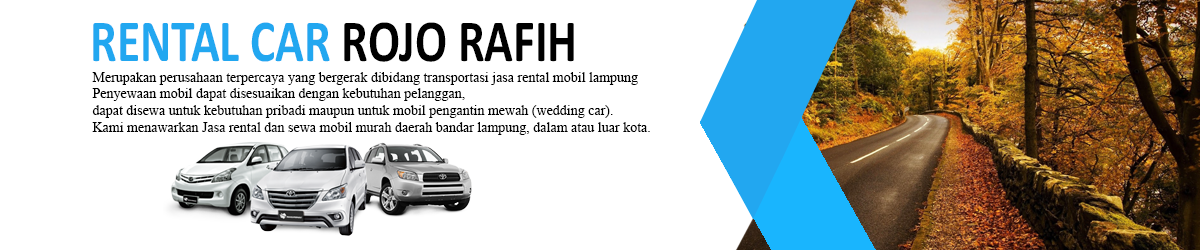
<style>
.page{position:relative;width:1200px;height:250px;background:#ffffff}
.page>*{position:absolute;margin:0}
.t1{font:60px "Calibri-Bold";color:#22a7f0;scale:0.79 1}
.t2{font:60px "Calibri-Bold";color:#000000;scale:0.79 1}
.t3{font:14px "TimesNewRomanPSMT";color:#000000}
</style>
<div class="page">
<p class="t1" style="left:93px;top:22px;width:481px;height:40px">RENTAL CAR<span class="t2"> ROJO RAFIH</span></p>
<p class="t3" style="left:92px;top:72px;width:558px;height:63px">Merupakan perusahaan terpercaya yang bergerak dibidang transportasi jasa rental mobil lampung<br>Penyewaan mobil dapat disesuaikan dengan kebutuhan pelanggan, <br>dapat disewa untuk kebutuhan pribadi maupun untuk mobil pengantin mewah (wedding car). <br>Kami menawarkan Jasa rental dan sewa mobil murah daerah bandar lampung, dalam atau luar kota.</p>
</div>
